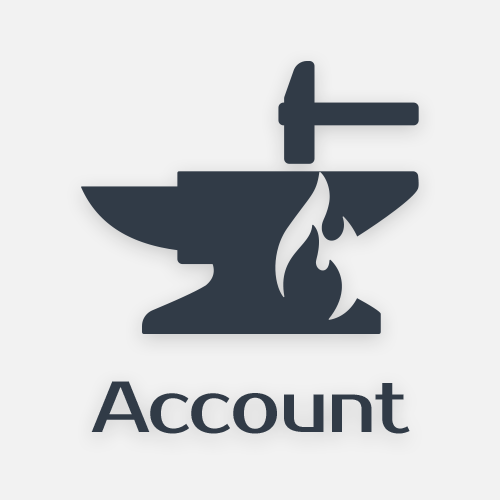
<style>
.page{position:relative;width:500px;height:500px;background:#f2f2f2}
.page>*{position:absolute;margin:0}
.t1{font:72px "ProstoOne-Regular";color:#313b47}
</style>
<div class="page">
<p class="t1" style="left:91px;top:381px;width:319px;height:53px">Account</p>
</div>
